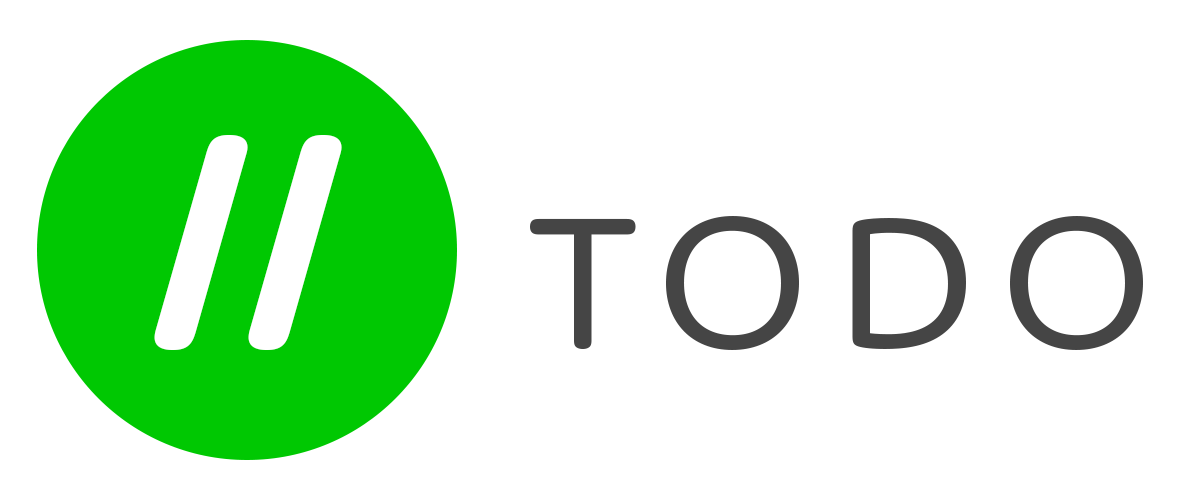
<style>
.page{position:relative;width:1180px;height:500px;background:#ffffff}
.page>*{position:absolute;margin:0}
.t1{font:275.5px "DomusTitling-Bold";letter-spacing:-0.01em;color:#ffffff}
.t2{font:200px "DomusTitling";letter-spacing:0.1em;color:#454545}
</style>
<div class="page">
<p class="t1" style="left:154px;top:135px;width:188px;height:215px">//</p>
<p class="t2" style="left:530px;top:216px;width:613px;height:134px">TODO</p>
</div>
